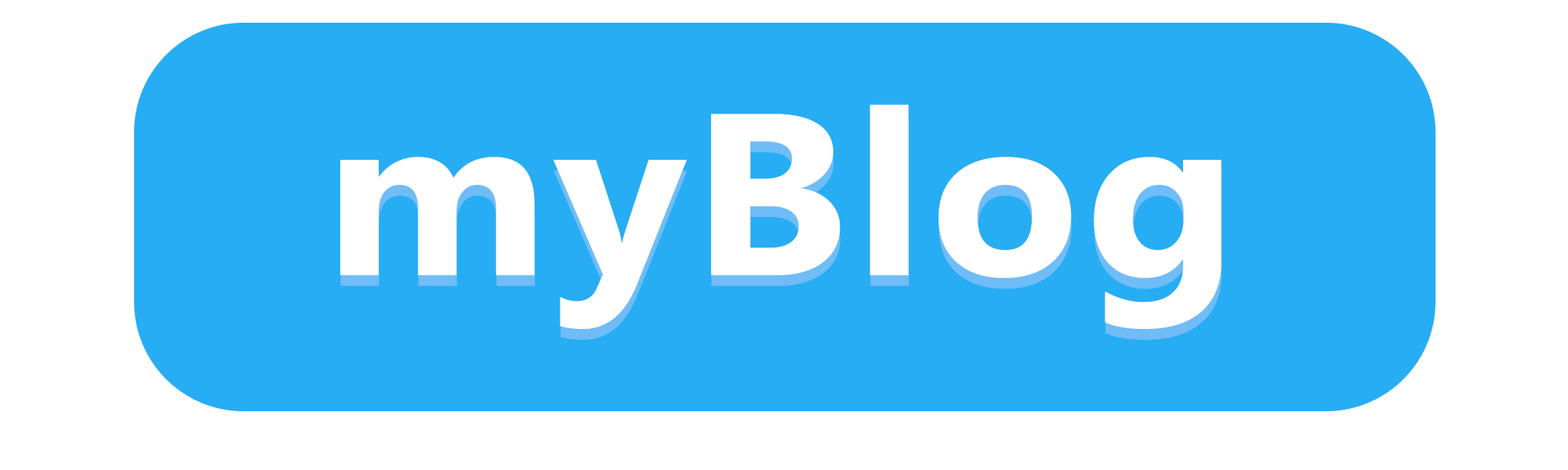
<style>
.page{position:relative;width:1568px;height:470px;background:#27adf3}
.page>*{position:absolute;margin:0}
.t1{font:229.4px "Gadugi-Bold";color:#ffffff;font-weight:bold;scale:1.06 1}
</style>
<div class="page">
<p class="t1" style="left:340px;top:104px;width:881px;height:225px">myBlog</p>
<p class="t1" style="left:340px;top:115px;width:882px;height:225px">myBlog</p>
</div>
